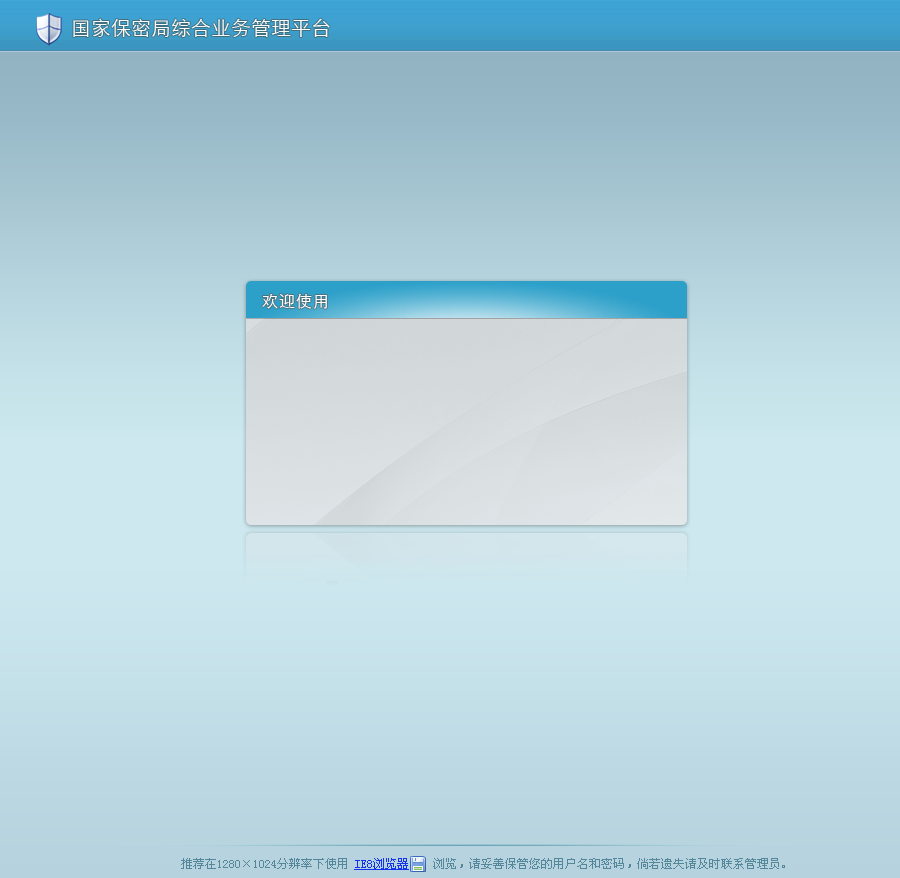
<style>
.page{position:relative;width:900px;height:878px}
.page>*{position:absolute;margin:0}
.t1{font:20px "STXihei";color:#fbfbfb}
.t2{font:16px "STXihei";letter-spacing:0.06em;color:#ffffff}
.t3{font:12px "NSimSun";color:#55879a}
.t4{font:12px "NSimSun";color:#1432ee;text-decoration:underline}
</style>
<div class="page">
<p class="t1" style="left:73px;top:18px;width:257px;height:19px">国家保密局综合业务管理平台</p>
<p class="t2" style="left:262px;top:293px;width:65px;height:16px">欢迎使用</p>
<p class="t3" style="left:181px;top:858px;width:604px;height:12px">推荐在1280×1024分辨率下使用 <span class="t4">IE8浏览器    </span>浏览，请妥善保管您的用户名和密码，倘若遗失请及时联系管理员。</p>
</div>
